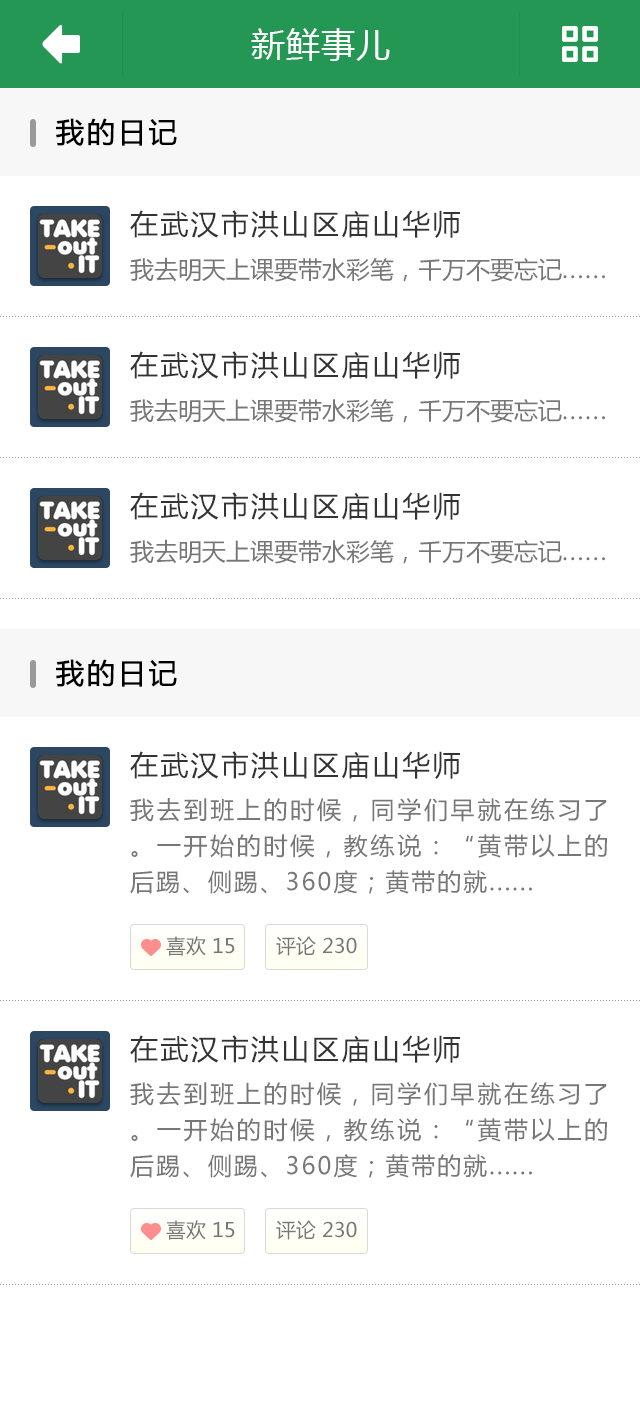
<style>
.page{position:relative;width:640px;height:1425px;background:#ffffff}
.page>*{position:absolute;margin:0}
.t1{font:28px "MicrosoftYaHei";letter-spacing:0.08em;color:#000000;font-weight:bold}
.t2{font:28px "MicrosoftYaHei";letter-spacing:0.08em;color:#333333}
.t3{font:24px "MicrosoftYaHei";color:#777777}
.t4{font:24px "MicrosoftYaHei";letter-spacing:0.08em;color:#777777}
.t5{font:24px/36px "MicrosoftYaHei";letter-spacing:0.08em;color:#777777}
.t6{font:20px "MicrosoftYaHei";color:#777777}
</style>
<div class="page">
<p class="t1" style="left:56px;top:118px;width:121px;height:28px">我的日记</p>
<p class="t2" style="left:130px;top:210px;width:330px;height:28px">在武汉市洪山区庙山华师</p>
<p class="t3" style="left:130px;top:257px;width:475px;height:25px">我去明天上课要带水彩笔，千万不要忘记<span class="t4">......</span></p>
<p class="t2" style="left:130px;top:351px;width:330px;height:28px">在武汉市洪山区庙山华师</p>
<p class="t3" style="left:130px;top:398px;width:475px;height:25px">我去明天上课要带水彩笔，千万不要忘记<span class="t4">......</span></p>
<p class="t2" style="left:130px;top:492px;width:330px;height:28px">在武汉市洪山区庙山华师</p>
<p class="t3" style="left:130px;top:539px;width:475px;height:25px">我去明天上课要带水彩笔，千万不要忘记<span class="t4">......</span></p>
<p class="t1" style="left:56px;top:659px;width:121px;height:28px">我的日记</p>
<p class="t2" style="left:130px;top:751px;width:330px;height:28px">在武汉市洪山区庙山华师</p>
<p class="t5" style="left:130px;top:798px;width:477px;height:96px;text-align:justify">我去到班上的时候，同学们早就在练习了。一开始的时候，教练说：“黄带以上的后踢、侧踢、360度；黄带的就......</p>
<p class="t6" style="left:166px;top:936px;width:69px;height:20px">喜欢 15</p>
<p class="t6" style="left:276px;top:936px;width:81px;height:20px">评论 230</p>
<p class="t2" style="left:130px;top:1035px;width:330px;height:28px">在武汉市洪山区庙山华师</p>
<p class="t5" style="left:130px;top:1082px;width:477px;height:96px;text-align:justify">我去到班上的时候，同学们早就在练习了。一开始的时候，教练说：“黄带以上的后踢、侧踢、360度；黄带的就......</p>
<p class="t6" style="left:166px;top:1220px;width:69px;height:20px">喜欢 15</p>
<p class="t6" style="left:276px;top:1220px;width:81px;height:20px">评论 230</p>
</div>
